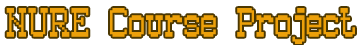
<style>
.page{position:relative;width:360px;height:45px;background:#ffffff}
.page>*{position:absolute;margin:0}
.t1{font:48px "Old_Pixel-7";color:#eca00a}
</style>
<div class="page">
<p class="t1" style="left:6px;top:8px;width:349px;height:36px">NURE Course Project</p>
</div>
